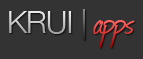
<style>
.page{position:relative;width:143px;height:59px;background:#333333}
.page>*{position:absolute;margin:0}
.t1{font:31px "HelveticaNeue-Light";letter-spacing:-0.025em}
.t2{font:31px "HelveticaNeue";letter-spacing:-0.025em}
.t3{font:41.3px "Journal";letter-spacing:-0.025em;color:#eb4d4d}
</style>
<div class="page">
<p class="t1" style="left:9px;top:9px;width:76px;height:31px">KRUI <span class="t2">|</span></p>
<p class="t3" style="left:93px;top:20px;width:42px;height:28px">apps</p>
</div>
